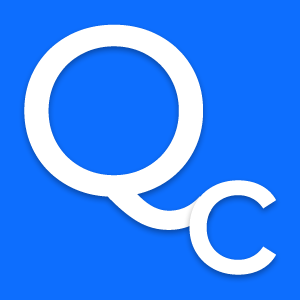
<style>
.page{position:relative;width:300px;height:300px;background:#0d6efe}
.page>*{position:absolute;margin:0}
.t1{font:240px "Montserrat-Medium";color:#ffffff}
.t2{font:174px "Montserrat-Medium";color:#ffffff}
</style>
<div class="page">
<p class="t1" style="left:24px;top:24px;width:188px;height:206px">Q</p>
<p class="t2" style="left:189px;top:180px;width:87px;height:95px">c</p>
</div>
